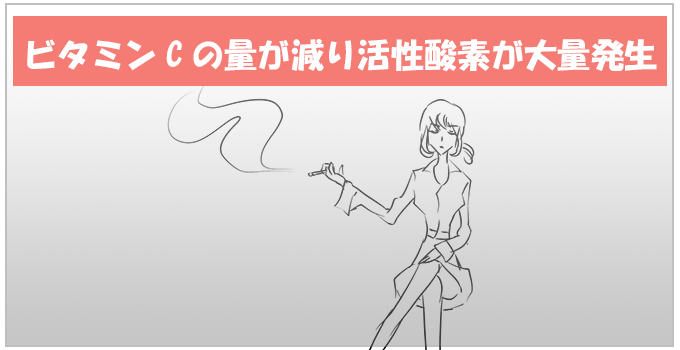
<style>
.page{position:relative;width:680px;height:350px}
.page>*{position:absolute;margin:0}
.t1{font:33.3px "HGSoeiKakupoptai";color:#ffffff}
</style>
<div class="page">
<p class="t1" style="left:27px;top:39px;width:630px;height:33px">ビタミンCの量が減り活性酸素が大量発生</p>
</div>
